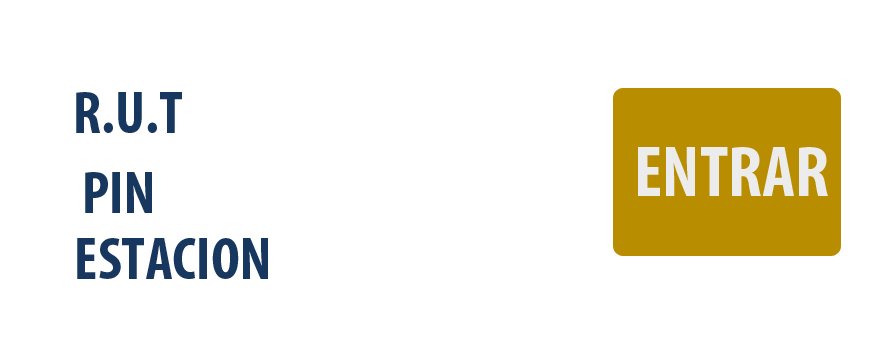
<style>
.page{position:relative;width:879px;height:352px;background:#ffffff}
.page>*{position:absolute;margin:0}
.t1{font:60px "MyriadPro-BoldCond";color:#17375e}
.t2{font:72px "MyriadPro-BoldCond";color:#ececec}
</style>
<div class="page">
<p class="t1" style="left:76px;top:92px;width:106px;height:41px">R.U.T</p>
<p class="t2" style="left:638px;top:147px;width:190px;height:49px">ENTRAR</p>
<p class="t1" style="left:85px;top:172px;width:67px;height:41px">PIN</p>
<p class="t1" style="left:77px;top:238px;width:191px;height:41px">ESTACION</p>
</div>
